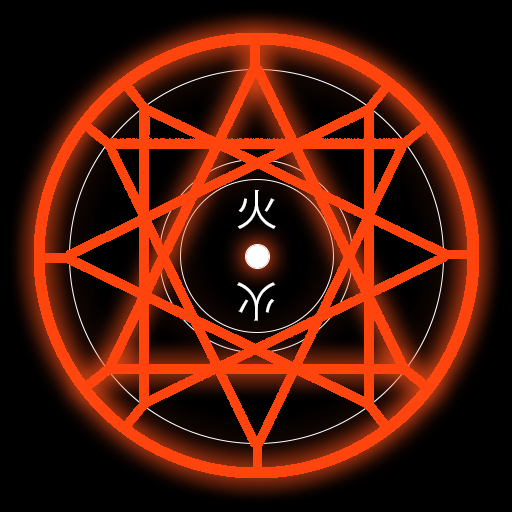
<style>
.page{position:relative;width:512px;height:512px;background:#000000}
.page>*{position:absolute;margin:0}
.t1{font:41.7px "KozGoPr6N-Regular";color:#ffffff}
</style>
<div class="page">
<p class="t1" style="left:237px;top:189px;width:39px;height:40px">火</p>
<p class="t1" style="left:237px;top:282px;width:39px;height:39px;rotate:-180deg">火</p>
</div>
